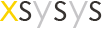
<style>
.page{position:relative;width:103px;height:30px;background:#ffffff}
.page>*{position:absolute;margin:0}
.t1{font:38px "CenturyGothic";color:#fad300}
.t2{font:38px "CenturyGothic";color:#373330}
.t3{font:38px "CenturyGothic";color:#c6c5c7}
</style>
<div class="page">
<p class="t1" style="left:0px;top:1px;width:102px;height:27px">x<span class="t2">s</span><span class="t3">y</span><span class="t2">s</span><span class="t3">y</span><span class="t2">s</span></p>
</div>
